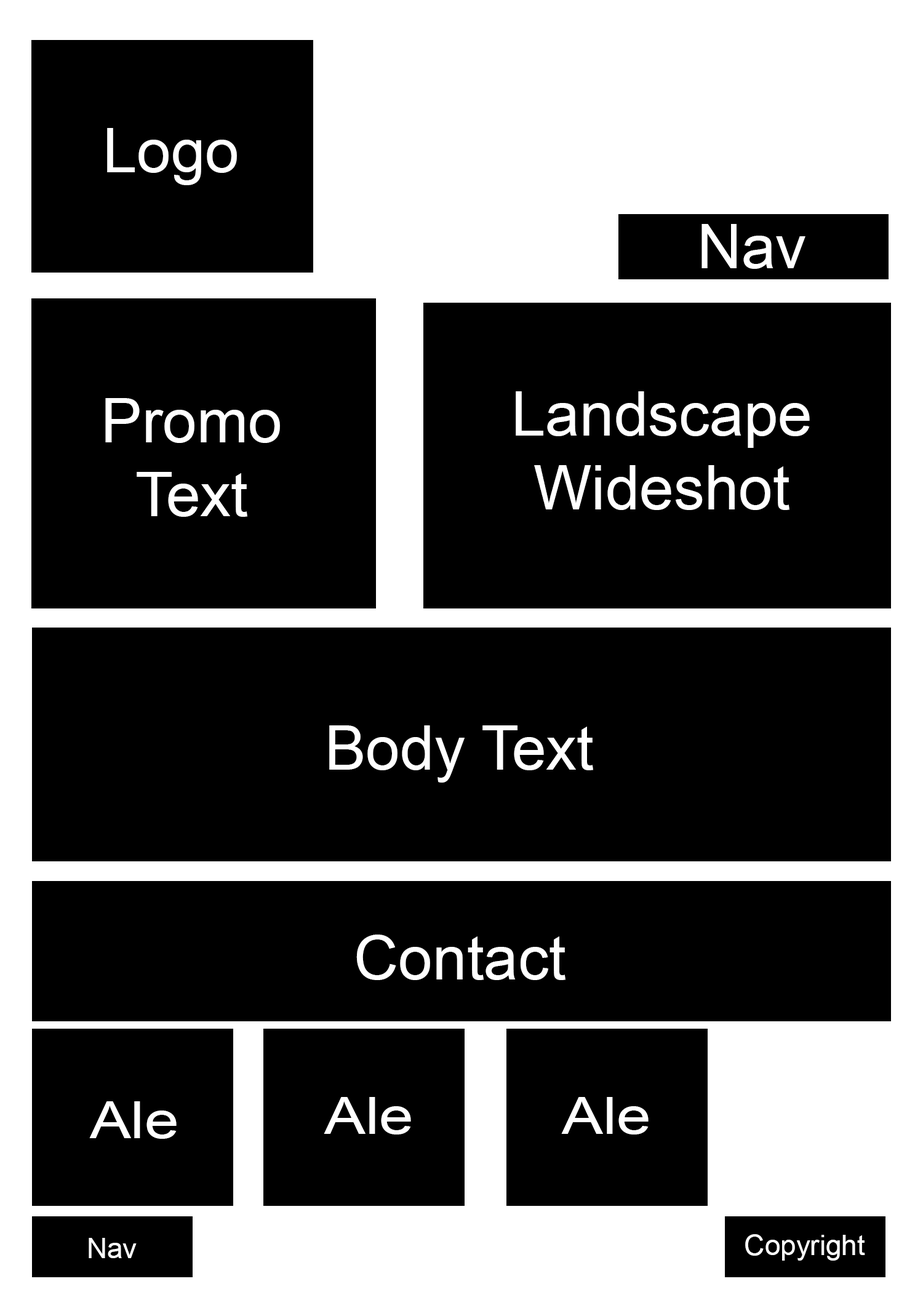
<style>
.page{position:relative;width:923px;height:1292px;background:#000000}
.page>*{position:absolute;margin:0}
.t1{font:61.5px "ArialMT";color:#ffffff}
.t2{font:51.4px "ArialMT";color:#ffffff;scale:1.2 1}
.t3{font:28.2px "ArialMT";color:#ffffff}
</style>
<div class="page">
<p class="t1" style="left:107px;top:128px;width:130px;height:57px">Logo</p>
<p class="t1" style="left:701px;top:224px;width:104px;height:45px">Nav</p>
<p class="t1" style="left:105px;top:398px;width:175px;height:119px;text-align:center">Promo<br>Text</p>
<p class="t1" style="left:516px;top:391px;width:294px;height:119px;text-align:center">Landscape<br>Wideshot</p>
<p class="t1" style="left:329px;top:725px;width:264px;height:58px">Body Text</p>
<p class="t1" style="left:356px;top:935px;width:209px;height:45px">Contact</p>
<p class="t2" style="left:324px;top:1097px;width:87px;height:38px">Ale</p>
<p class="t2" style="left:561px;top:1097px;width:87px;height:38px">Ale</p>
<p class="t2" style="left:89px;top:1101px;width:88px;height:38px">Ale</p>
<p class="t3" style="left:89px;top:1238px;width:48px;height:20px">Nav</p>
<p class="t3" style="left:745px;top:1234px;width:120px;height:27px">Copyright</p>
</div>
